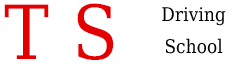
<style>
.page{position:relative;width:241px;height:64px;background:#ffffff}
.page>*{position:absolute;margin:0}
.t1{font:74.7px "DejaVuSerifCondensed";letter-spacing:0.01em;color:#e40000}
.t2{font:18.7px/32px "DejaVuSerifCondensed";letter-spacing:0.01em;color:#000000}
</style>
<div class="page">
<p class="t1" style="left:4px;top:3px;width:110px;height:57px">T S</p>
<p class="t2" style="left:162px;top:7px;width:64px;height:47px;text-align:center">Driving<br>School</p>
</div>
